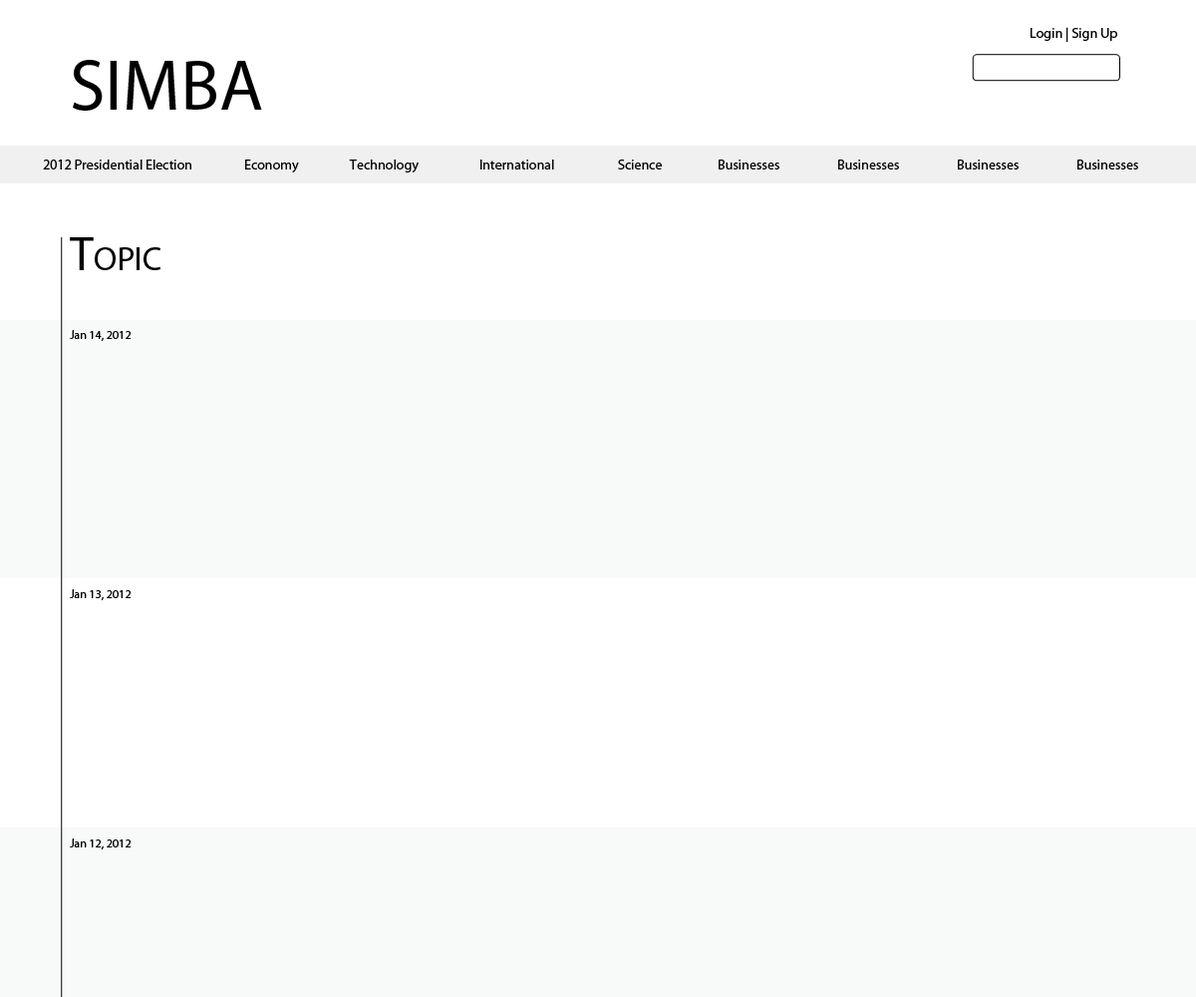
<style>
.page{position:relative;width:1196px;height:997px;background:#ffffff}
.page>*{position:absolute;margin:0}
.t1{font:14px "MyriadPro-Regular";color:#000000}
.t2{font:71.8px "MyriadPro-Regular";color:#000000}
.t3{font:14px "MyriadPro-Regular";color:#040404}
.t4{font:47.8px "MyriadPro-Regular";color:#000000;font-variant:small-caps}
.t5{font:12px "MyriadPro-Regular";color:#040404}
</style>
<div class="page">
<p class="t1" style="left:1031px;top:27px;width:86px;height:15px">Login | Sign Up</p>
<p class="t2" style="left:73px;top:60px;width:189px;height:51px">SIMBA</p>
<p class="t3" style="left:43px;top:159px;width:148px;height:10px">2012 Presidential Election</p>
<p class="t3" style="left:245px;top:159px;width:54px;height:13px">Economy</p>
<p class="t3" style="left:349px;top:159px;width:70px;height:13px">Technology</p>
<p class="t3" style="left:480px;top:159px;width:74px;height:10px">International</p>
<p class="t3" style="left:618px;top:159px;width:44px;height:10px">Science</p>
<p class="t3" style="left:719px;top:159px;width:61px;height:10px">Businesses</p>
<p class="t3" style="left:838px;top:159px;width:61px;height:10px">Businesses</p>
<p class="t3" style="left:958px;top:159px;width:61px;height:10px">Businesses</p>
<p class="t3" style="left:1078px;top:159px;width:60px;height:10px">Businesses</p>
<p class="t4" style="left:70px;top:237px;width:90px;height:33px">Topic</p>
<p class="t5" style="left:70px;top:330px;width:62px;height:11px">Jan 14, 2012</p>
<p class="t5" style="left:70px;top:589px;width:62px;height:11px">Jan 13, 2012</p>
</div>
